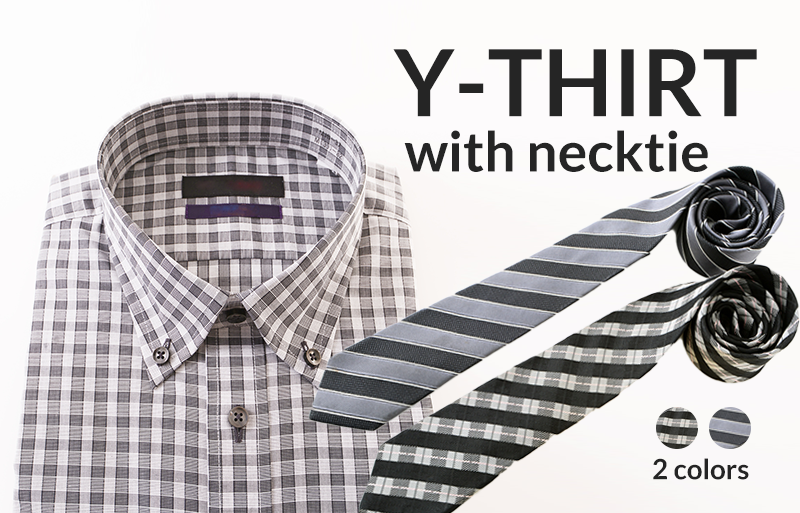
<style>
.page{position:relative;width:800px;height:513px}
.page>*{position:absolute;margin:0}
.t1{font:55.2px/11.2px "Lato-Bold";color:#242424}
.t2{font:92.7px/11.2px "Lato-Bold";color:#242424}
.t3{font:27.8px "Lato-Bold";color:#242424}
</style>
<div class="page">
<p class="t1" style="left:393px;top:49px;width:364px;height:123px"><span class="t2">Y-THIRT<br></span> with necktie</p>
<p class="t3" style="left:653px;top:458px;width:96px;height:22px">2 colors</p>
</div>
